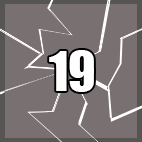
<style>
.page{position:relative;width:142px;height:142px;background:#797171}
.page>*{position:absolute;margin:0}
.t1{font:51px "Impact";color:#ffffff}
</style>
<div class="page">
<p class="t1" style="left:49px;top:50px;width:45px;height:42px">19</p>
</div>
